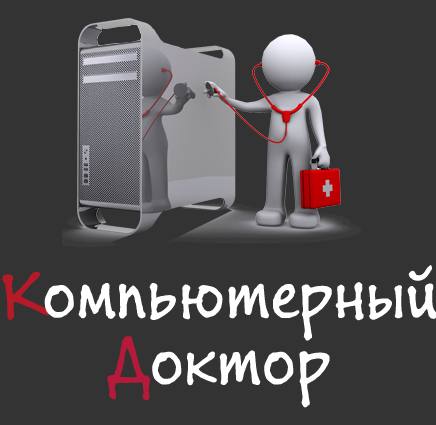
<style>
.page{position:relative;width:436px;height:425px;background:#333333}
.page>*{position:absolute;margin:0}
.t1{font:75px/66.7px "BuxtonSketch";color:#ffffff}
.t2{font:75px/66.7px "BuxtonSketch";color:#b61a28}
.t3{font:75px/66.7px "BuxtonSketch";color:#b61a3b}
</style>
<div class="page">
<p class="t1" style="left:2px;top:265px;width:436px;height:143px;text-align:center"><span class="t2">К</span>омпьютерный<br><span class="t3">Д</span>октор</p>
</div>
